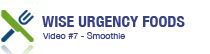
<style>
.page{position:relative;width:210px;height:54px;background:#ffffff}
.page>*{position:absolute;margin:0}
.t1{font:16px "HelveticaNeue-CondensedBold";color:#374188}
.t2{font:9px "HelveticaNeue";color:#374188}
</style>
<div class="page">
<p class="t1" style="left:42px;top:16px;width:143px;height:11px">WISE URGENCY FOODS</p>
<p class="t2" style="left:42px;top:32px;width:83px;height:7px">Video #7 - Smoothie</p>
</div>
